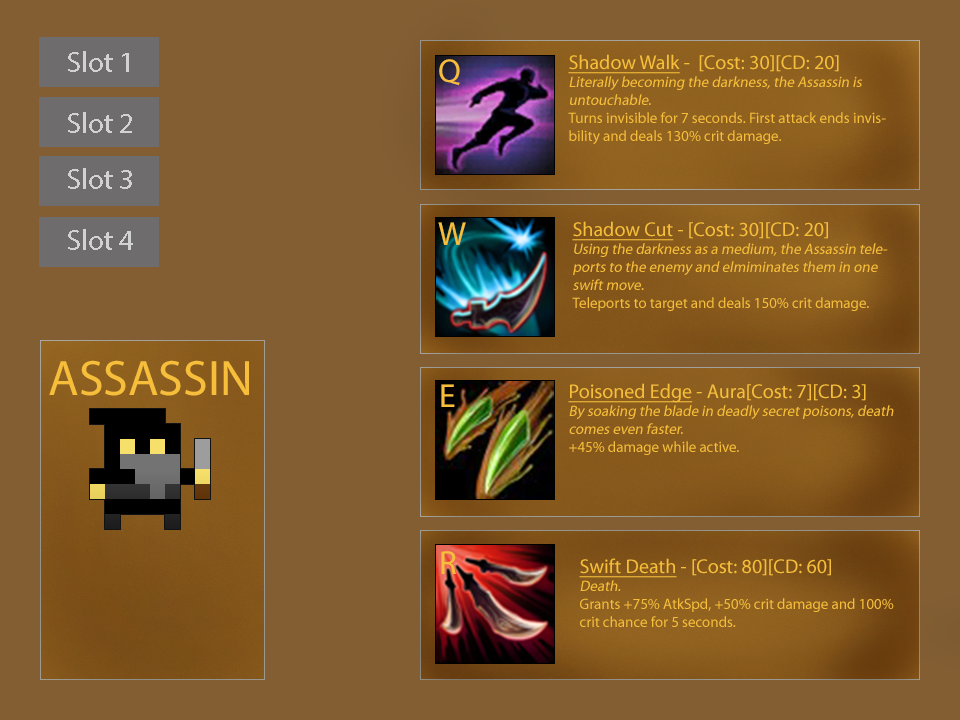
<style>
.page{position:relative;width:960px;height:720px;background:#835e33}
.page>*{position:absolute;margin:0}
.t1{font:29.2px "MyriadPro-Regular";color:#d2d2d2}
.t2{font:125px "MyriadPro-Regular";color:#ffffff}
.t3{font:15px "MyriadPro-Regular";color:#f6be3a}
.t4{font:20px "MyriadPro-Regular";color:#f6be3a;text-decoration:underline}
.t5{font:20px "MyriadPro-Regular";color:#f6be3a}
.t6{font:15px "MyriadPro-Regular";color:#f6be3a;font-style:italic}
.t7{font:33.2px "MyriadPro-Regular";color:#f6be3a}
.t8{font:50px "MyriadPro-Regular";color:#f6be3a}
</style>
<div class="page">
<p class="t1" style="left:68px;top:51px;width:61px;height:21px;text-align:center">Slot 1<br><span class="t2">hERO</span></p>
<p class="t3" style="left:568px;top:54px;width:318px;height:90px"><span class="t4">Shadow Walk</span><span class="t5"> -  [Cost: 30][CD: 20]<br></span><span class="t6">Literally becoming the darkness, the Assassin is untouchable.<br></span>Turns invisible for 7 seconds. First attack ends invisbility and deals 130% crit damage.</p>
<p class="t7" style="left:439px;top:59px;width:21px;height:27px">Q</p>
<p class="t1" style="left:68px;top:112px;width:64px;height:21px;text-align:center">Slot 2<br><span class="t2">hERO</span></p>
<p class="t1" style="left:68px;top:168px;width:64px;height:21px;text-align:center">Slot 3<br><span class="t2">hERO</span></p>
<p class="t7" style="left:438px;top:222px;width:28px;height:23px">W</p>
<p class="t6" style="left:572px;top:221px;width:316px;height:90px"><span class="t4">Shadow Cut</span><span class="t5"> - [Cost: 30][CD: 20]<br></span>Using the darkness as a medium, the Assassin teleports to the enemy and elmiminates them in one swift move.<br><span class="t3">Teleports to target and deals 150% crit damage.</span></p>
<p class="t1" style="left:68px;top:229px;width:65px;height:21px;text-align:center">Slot 4<br><span class="t2">hERO</span></p>
<p class="t8" style="left:49px;top:360px;width:200px;height:36px">ASSASSIN</p>
<p class="t7" style="left:441px;top:384px;width:14px;height:23px">E</p>
<p class="t6" style="left:568px;top:383px;width:326px;height:72px"><span class="t4">Poisoned Edge</span><span class="t5"> - Aura[Cost: 7][CD: 3]<br></span>By soaking the blade in deadly secret poisons, death comes even faster. <br><span class="t3">+45% damage while active.</span></p>
<p class="t7" style="left:441px;top:551px;width:15px;height:23px">R</p>
<p class="t3" style="left:579px;top:558px;width:315px;height:69px"><span class="t4">Swift Death</span><span class="t5"> - [Cost: 80][CD: 60]<br></span><span class="t6">Death.<br></span>Grants +75% AtkSpd, +50% crit damage and 100% crit chance for 5 seconds.</p>
</div>
